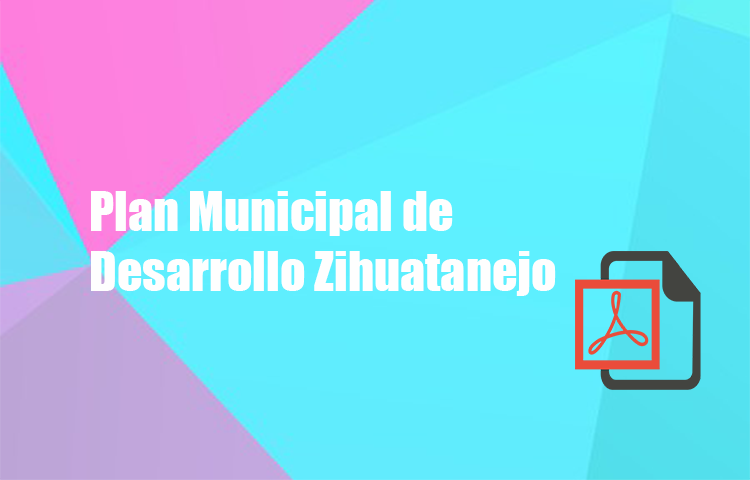
<style>
.page{position:relative;width:750px;height:480px}
.page>*{position:absolute;margin:0}
.t1{font:50px "Impact";color:#fefefe}
</style>
<div class="page">
<p class="t1" style="left:91px;top:191px;width:465px;height:105px">Plan Municipal de Desarrollo Zihuatanejo</p>
</div>
